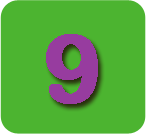
<style>
.page{position:relative;width:146px;height:134px;background:#4cb430}
.page>*{position:absolute;margin:0}
.t1{font:94.7px "ArialRoundedMTBold";letter-spacing:-0.01em;color:#973c9f;font-weight:bold}
</style>
<div class="page">
<p class="t1" style="left:46px;top:34px;width:52px;height:70px">9</p>
</div>
